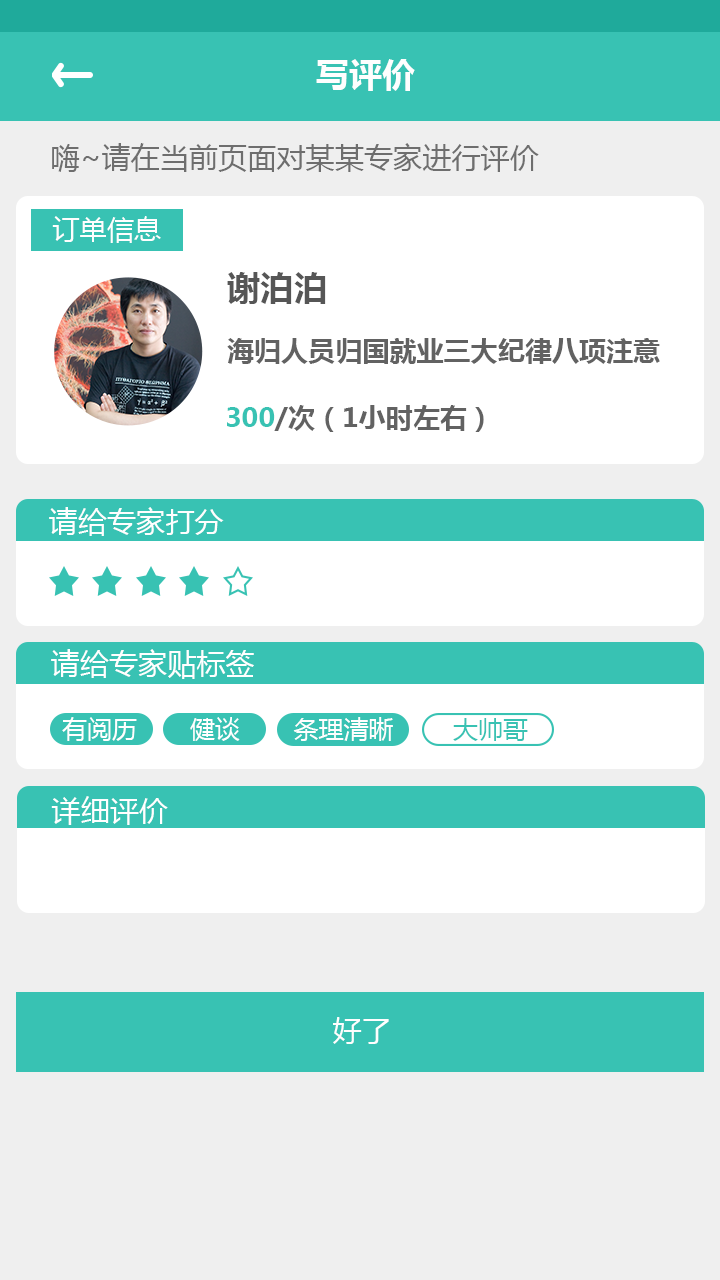
<style>
.page{position:relative;width:720px;height:1280px;background:#efefef}
.page>*{position:absolute;margin:0}
.t1{font:33.3px "MicrosoftYaHei-Bold";color:#fefefe}
.t2{font:29.2px "MicrosoftYaHei";color:#6e6e6e}
.t3{font:27.1px "MicrosoftYaHei";color:#fefefe}
.t4{font:33.3px "MicrosoftYaHei-Bold";color:#565656}
.t5{font:27.1px "MicrosoftYaHei-Bold";color:#626262}
.t6{font:27.1px "MicrosoftYaHei-Bold";color:#38c2b3}
.t7{font:29.2px "MicrosoftYaHei";color:#fefefe}
.t8{font:29.2px "MicrosoftYaHei";color:#ffffff}
.t9{font:25px "MicrosoftYaHei";color:#ffffff}
.t10{font:25px "MicrosoftYaHei";color:#fefefe}
.t11{font:25px "MicrosoftYaHei";color:#38c2b3}
</style>
<div class="page">
<p class="t1" style="left:316px;top:59px;width:99px;height:32px">写评价</p>
<p class="t2" style="left:52px;top:143px;width:487px;height:29px">嗨~请在当前页面对某某专家进行评价</p>
<p class="t3" style="left:52px;top:216px;width:109px;height:27px">订单信息</p>
<p class="t4" style="left:227px;top:272px;width:99px;height:32px">谢泊泊</p>
<p class="t5" style="left:227px;top:338px;width:433px;height:26px">海归人员归国就业三大纪律八项注意</p>
<p class="t5" style="left:227px;top:405px;width:257px;height:27px"><span class="t6">300</span>/次（1小时左右）</p>
<p class="t7" style="left:49px;top:507px;width:175px;height:29px">请给专家打分</p>
<p class="t8" style="left:51px;top:649px;width:203px;height:30px">请给专家贴标签</p>
<p class="t9" style="left:62px;top:717px;width:75px;height:24px">有阅历</p>
<p class="t9" style="left:190px;top:717px;width:50px;height:24px">健谈</p>
<p class="t10" style="left:293px;top:717px;width:100px;height:24px">条理清晰</p>
<p class="t11" style="left:453px;top:718px;width:75px;height:23px">大帅哥</p>
<p class="t8" style="left:51px;top:796px;width:117px;height:29px">详细评价</p>
<p class="t7" style="left:333px;top:1017px;width:56px;height:27px">好了</p>
</div>
